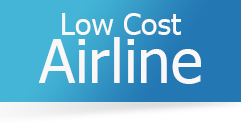
<style>
.page{position:relative;width:241px;height:125px}
.page>*{position:absolute;margin:0}
.t1{font:30px/48px "Tahoma";color:#faf7f7}
.t2{font:60px/48px "Tahoma";color:#faf7f7}
</style>
<div class="page">
<p class="t1" style="left:38px;top:13px;width:163px;height:71px;text-align:center">Low Cost<br><span class="t2">Airline</span></p>
</div>
